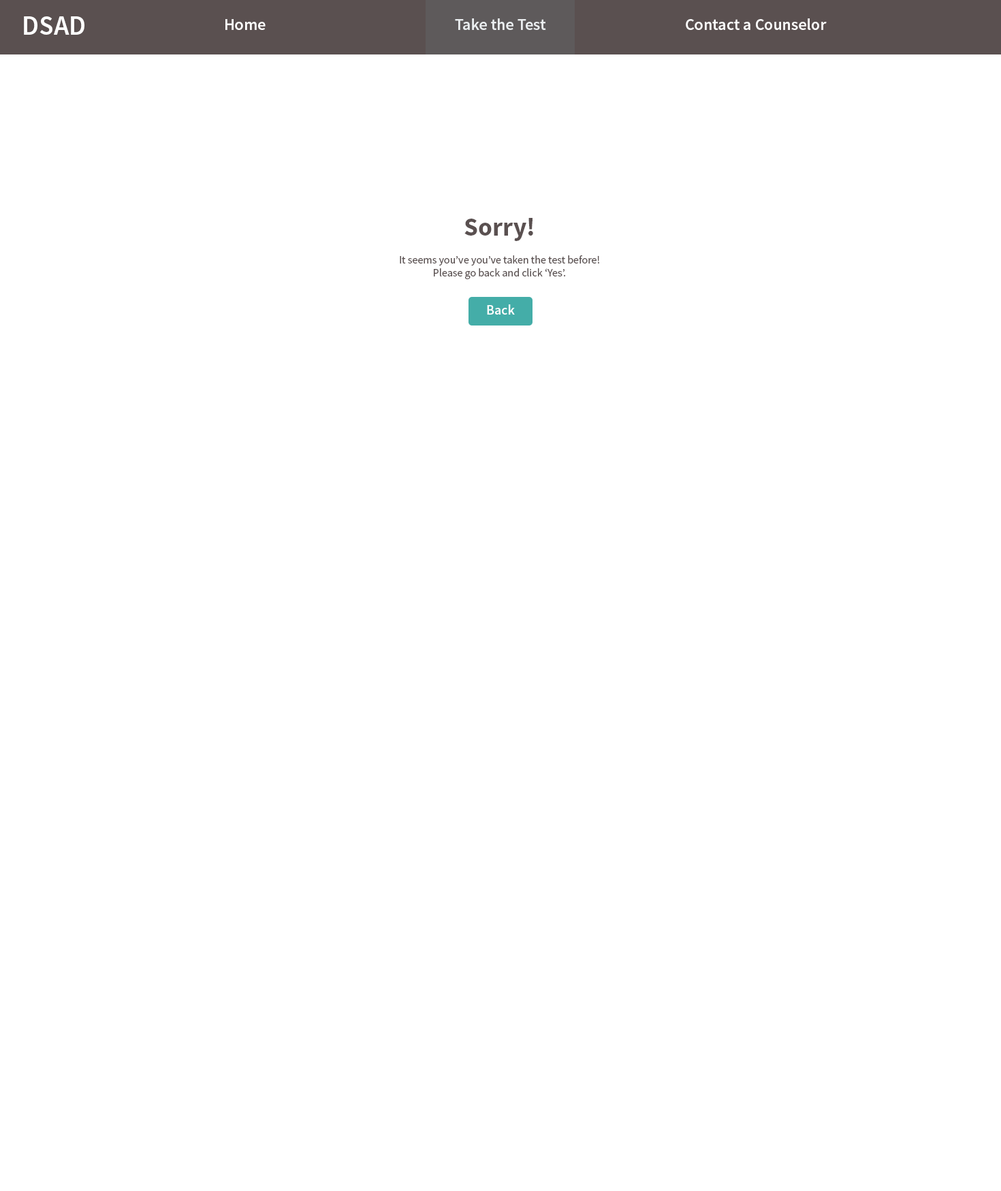
<style>
.page{position:relative;width:1001px;height:1191px;background:#ffffff}
.page>*{position:absolute;margin:0}
.t1{font:27.2px "SourceSansPro-Semibold";color:#ffffff}
.t2{font:16.3px "SourceSansPro-Semibold";color:#ffffff}
.t3{font:10.9px "SourceSansPro-Regular";color:#5a5050}
.t4{font:25.9px/32.7px "SourceSansPro-Bold";color:#5a5050}
.t5{font:13.6px "SourceSansPro-Semibold";color:#ffffff}
</style>
<div class="page">
<p class="t1" style="left:24px;top:16px;width:60px;height:19px">DSAD</p>
<p class="t2" style="left:225px;top:19px;width:41px;height:11px">Home</p>
<p class="t2" style="left:455px;top:18px;width:91px;height:12px">Take the Test</p>
<p class="t2" style="left:686px;top:18px;width:141px;height:12px">Contact a Counselor</p>
<p class="t3" style="left:400px;top:218px;width:199px;height:61px;text-align:center"><span class="t4">Sorry!<br></span>It seems you’ve you’ve taken the test before!<br>Please go back and click ‘Yes’.</p>
<p class="t5" style="left:487px;top:304px;width:28px;height:11px">Back</p>
</div>
